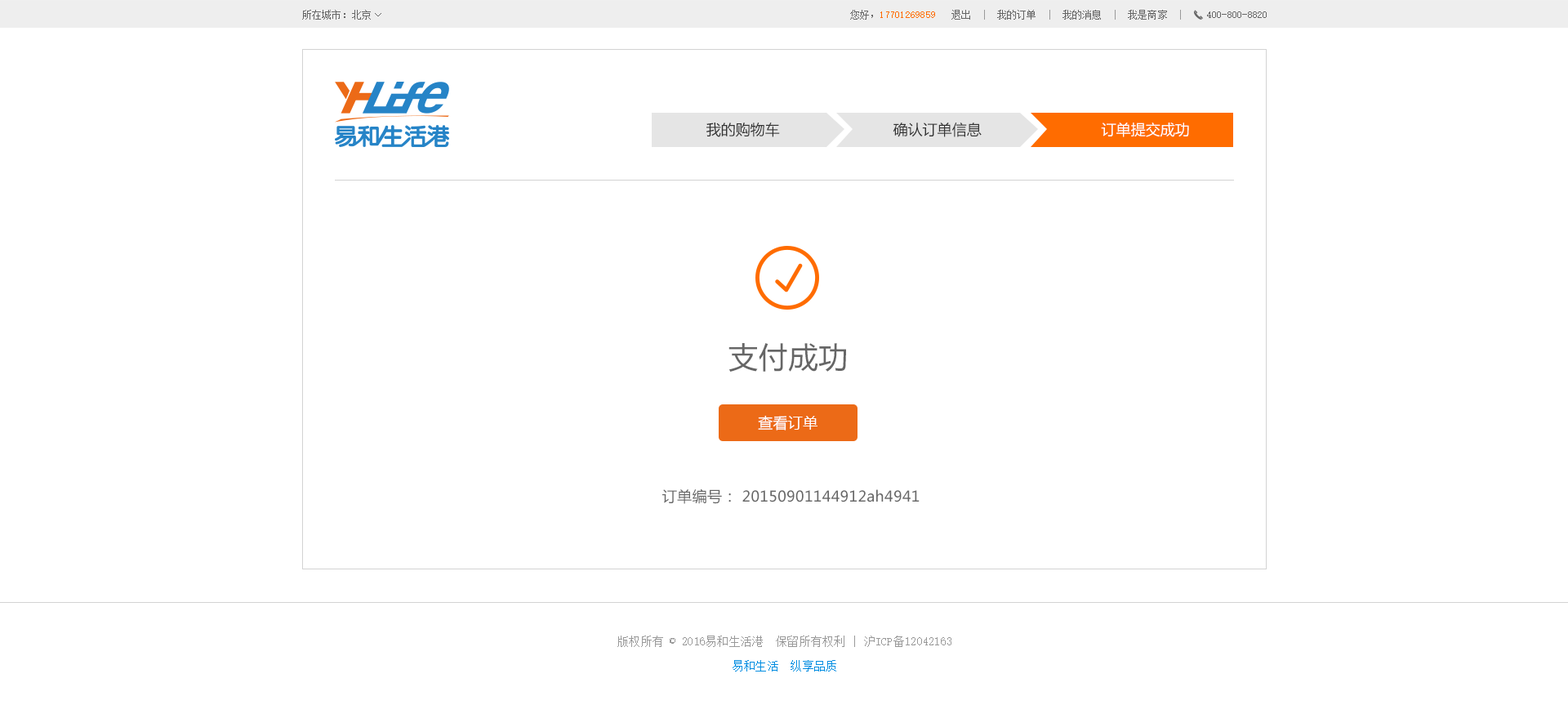
<style>
.page{position:relative;width:1568px;height:705px;background:#ffffff}
.page>*{position:absolute;margin:0}
.t1{font:9.8px "SimSun";letter-spacing:0.02em;color:#666666}
.t2{font:9.8px "SimSun";letter-spacing:0.02em;color:#ff6c00}
.t3{font:9.8px "SimSun";letter-spacing:0.02em;color:#999999}
.t4{font:14.7px "MicrosoftYaHei";color:#333333}
.t5{font:14.7px "MicrosoftYaHei";color:#ffffff}
.t6{font:29.4px "MicrosoftYaHei";letter-spacing:0.02em;color:#666666}
.t7{font:14.7px "MicrosoftYaHei";letter-spacing:0.02em;color:#ffffff}
.t8{font:14.7px "MicrosoftYaHei";letter-spacing:0.02em;color:#666666}
.t9{font:11.4px/24.5px "SimSun";letter-spacing:0.02em;color:#999999}
.t10{font:11.4px/24.5px "SimSun";letter-spacing:0.02em;color:#008de1}
</style>
<div class="page">
<p class="t1" style="left:302px;top:10px;width:69px;height:10px">所在城市：北京</p>
<p class="t1" style="left:375px;top:13px;width:6px;height:3px">&gt;</p>
<p class="t2" style="left:850px;top:10px;width:331px;height:10px"><span class="t1">您好，</span>17701269859<span class="t1">   退出</span><span class="t3">  |  </span><span class="t1">我的订单</span><span class="t3">  |  </span><span class="t1">我的消息</span><span class="t3">  |  </span><span class="t1">我是商家</span><span class="t3">  |</span></p>
<p class="t1" style="left:1207px;top:11px;width:60px;height:7px">400-800-8820</p>
<p class="t4" style="left:706px;top:122px;width:74px;height:15px">我的购物车</p>
<p class="t4" style="left:893px;top:122px;width:89px;height:15px">确认订单信息</p>
<p class="t5" style="left:1101px;top:122px;width:88px;height:15px">订单提交成功</p>
<p class="t6" style="left:728px;top:343px;width:118px;height:29px">支付成功</p>
<p class="t7" style="left:758px;top:415px;width:59px;height:15px">查看订单</p>
<p class="t8" style="left:662px;top:488px;width:258px;height:16px">订单编号： 20150901144912ah4941</p>
<p class="t9" style="left:617px;top:635px;width:334px;height:36px;text-align:center">版权所有 © 2016易和生活港  保留所有权利 | 沪ICP备12042163<br><span class="t10">易和生活  纵享品质</span></p>
</div>
